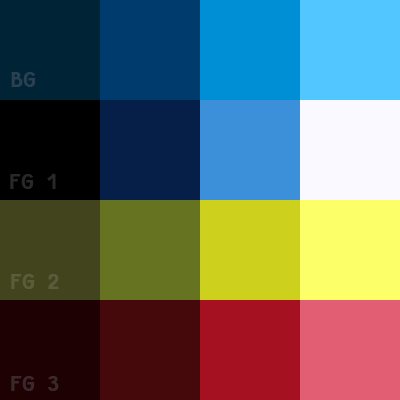
<style>
.page{position:relative;width:400px;height:400px}
.page>*{position:absolute;margin:0}
.t1{font:24px "FantasqueSansMono-Bold";color:#28404f}
.t2{font:24px "FantasqueSansMono-Bold";color:#282828}
.t3{font:24px "FantasqueSansMono-Bold";color:#5a5c3c}
.t4{font:24px "FantasqueSansMono-Bold";color:#3c282b}
</style>
<div class="page">
<p class="t1" style="left:11px;top:72px;width:25px;height:15px">BG</p>
<p class="t2" style="left:10px;top:173px;width:46px;height:16px">FG 1</p>
<p class="t3" style="left:11px;top:274px;width:48px;height:15px">FG 2</p>
<p class="t4" style="left:11px;top:376px;width:48px;height:15px">FG 3</p>
</div>
